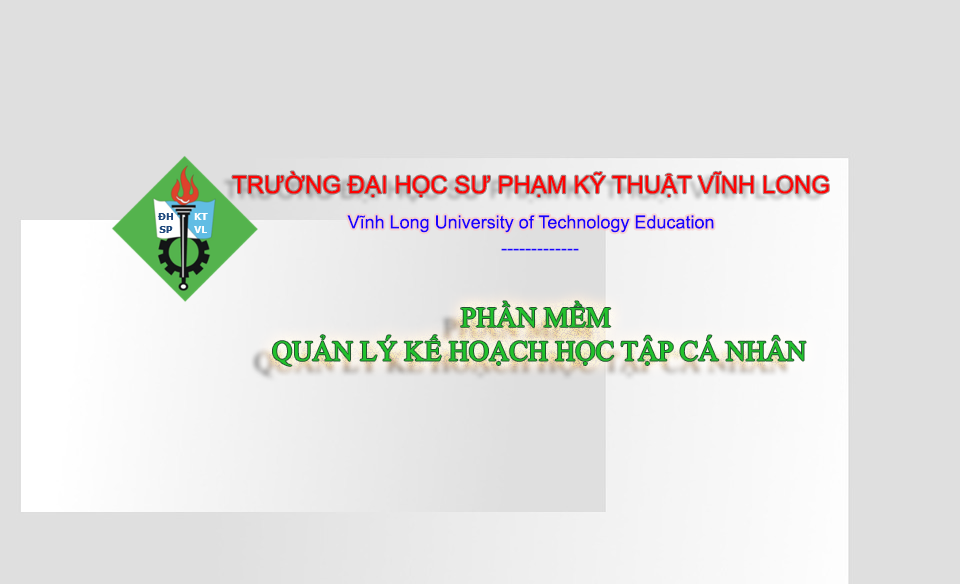
<style>
.page{position:relative;width:960px;height:584px;background:#dfdfdf}
.page>*{position:absolute;margin:0}
.t1{font:24px "ArialMT";color:#fe0202}
.t2{font:18px "ArialMT";color:#1a02fe}
.t3{font:28px "TimesNewRomanPSMT";color:#21c22c}
</style>
<div class="page">
<p class="t1" style="left:232px;top:171px;width:597px;height:26px">TRƯỜNG ĐẠI HỌC SƯ PHẠM KỸ THUẬT VĨNH LONG</p>
<p class="t2" style="left:347px;top:215px;width:367px;height:18px">Vĩnh Long University of Technology Education</p>
<p class="t2" style="left:501px;top:248px;width:78px;height:3px">-------------</p>
<p class="t3" style="left:273px;top:301px;width:533px;height:65px;text-align:center">PHẦN MỀM <br>QUẢN LÝ KẾ HOẠCH HỌC TẬP CÁ NHÂN</p>
</div>
